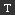
<style>
.page{position:relative;width:15px;height:15px;background:#333333}
.page>*{position:absolute;margin:0}
.t1{font:16px "ArabicTypesetting";color:#ffffff}
</style>
<div class="page">
<p class="t1" style="left:4px;top:4px;width:7px;height:8px">T</p>
</div>
